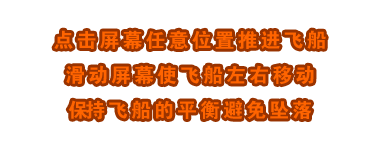
<style>
.page{position:relative;width:380px;height:150px;background:#ffffff}
.page>*{position:absolute;margin:0}
.t1{font:20px "Jdahei";letter-spacing:0.15em;color:#ff6400}
.t2{font:20px "Jdahei";letter-spacing:-0.15em;color:#ff6400}
</style>
<div class="page">
<p class="t1" style="left:54px;top:30px;width:272px;height:90px;text-align:center">点击屏幕任意位置推进飞船<br>滑动屏幕使飞船左右移动<span class="t2"><br>保</span>持飞船的平衡避免坠落</p>
</div>
